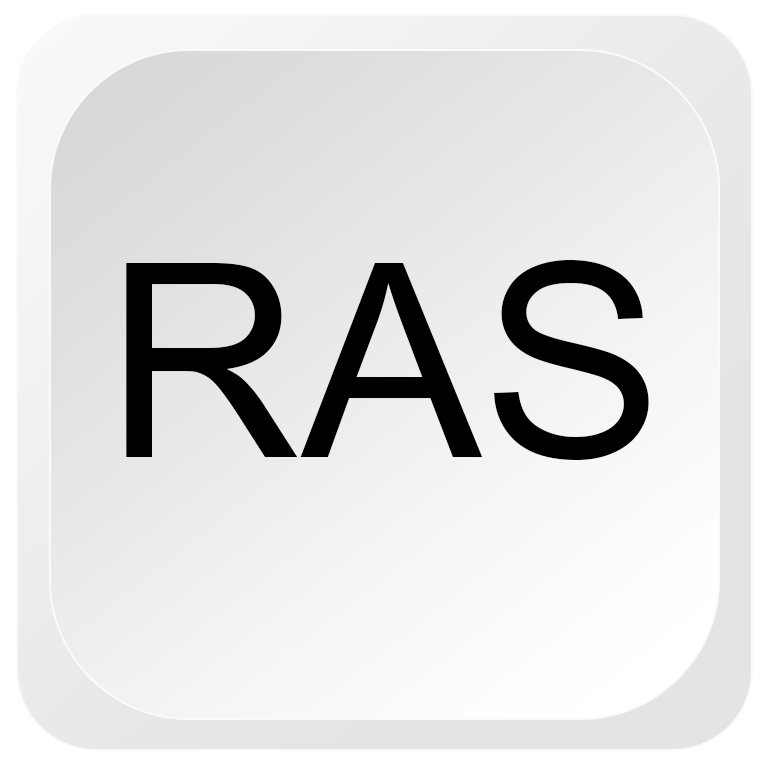
<style>
.page{position:relative;width:768px;height:768px}
.page>*{position:absolute;margin:0}
.t1{font:271px "ArialMT";color:#000000}
</style>
<div class="page">
<p class="t1" style="left:126px;top:260px;width:523px;height:200px">RAS</p>
</div>
